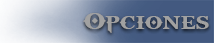
<style>
.page{position:relative;width:214px;height:43px}
.page>*{position:absolute;margin:0}
.t1{font:26px "GodOfWar";color:#a1a1a1}
</style>
<div class="page">
<p class="t1" style="left:83px;top:13px;width:126px;height:20px">Opciones</p>
</div>
